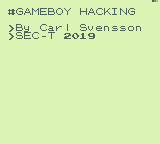
<style>
.page{position:relative;width:160px;height:144px;background:#dbf4b4}
.page>*{position:absolute;margin:0}
.t1{font:8px/8px "pokemon-font";color:#4c625a}
</style>
<div class="page">
<p class="t1" style="left:8px;top:8px;width:133px;height:32px">#GAMEBOY HACKING<br><br>&gt;By Carl Svensson<br>&gt;SEC-T 2019</p>
</div>
